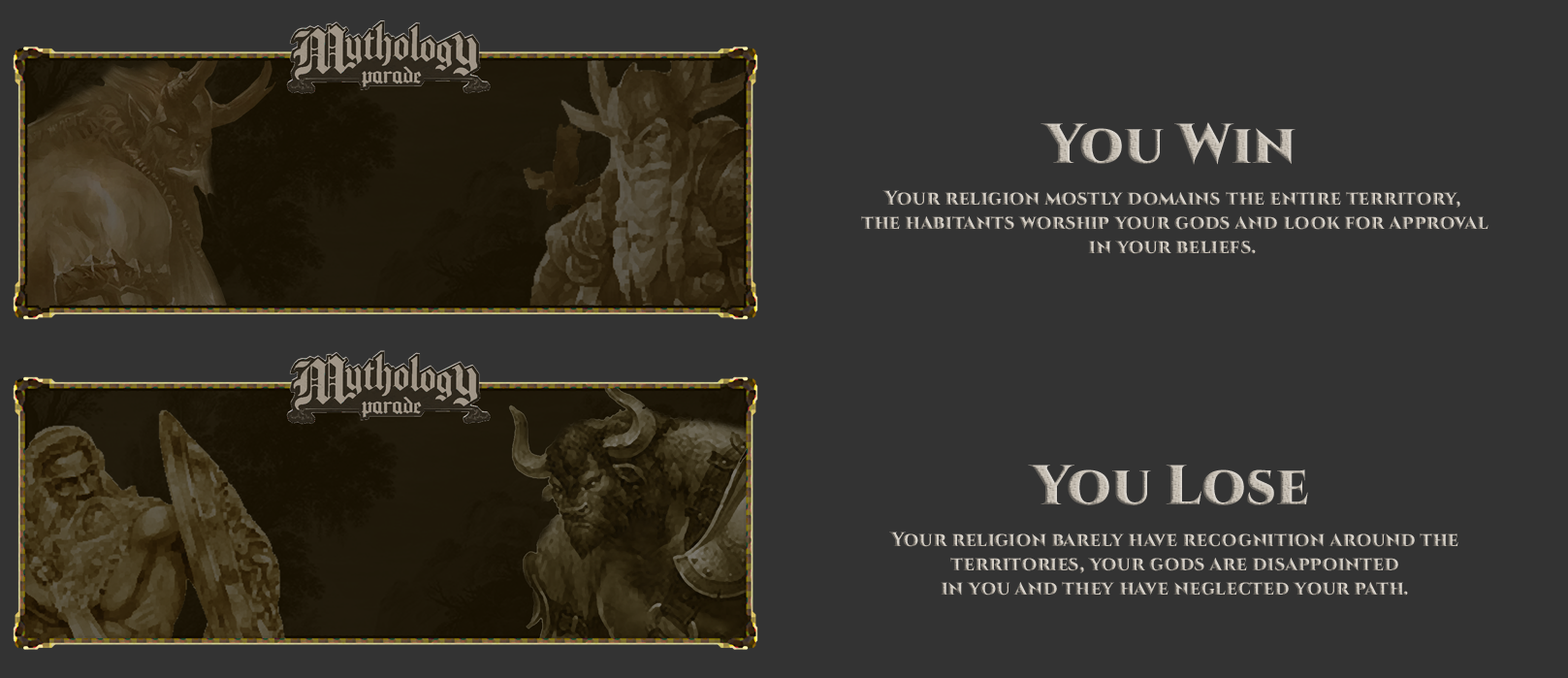
<style>
.page{position:relative;width:1568px;height:678px;background:#333333}
.page>*{position:absolute;margin:0}
.t1{font:56.2px "Cinzel-Black"}
.t2{font:19.9px/24.2px "Cinzel-Black"}
</style>
<div class="page">
<p class="t1" style="left:1040px;top:122px;width:256px;height:43px">You Win</p>
<p class="t2" style="left:861px;top:190px;width:627px;height:64px;text-align:center">Your religion mostly domains the entire territory, <br>the habitants worship your gods and look for approval<br>in your beliefs.</p>
<p class="t1" style="left:1028px;top:464px;width:280px;height:41px">You Lose</p>
<p class="t2" style="left:889px;top:531px;width:569px;height:64px;text-align:center">Your religion barely have recognition around the<br>territories, your gods are disappointed<br>in you and they have neglected your path.</p>
</div>
